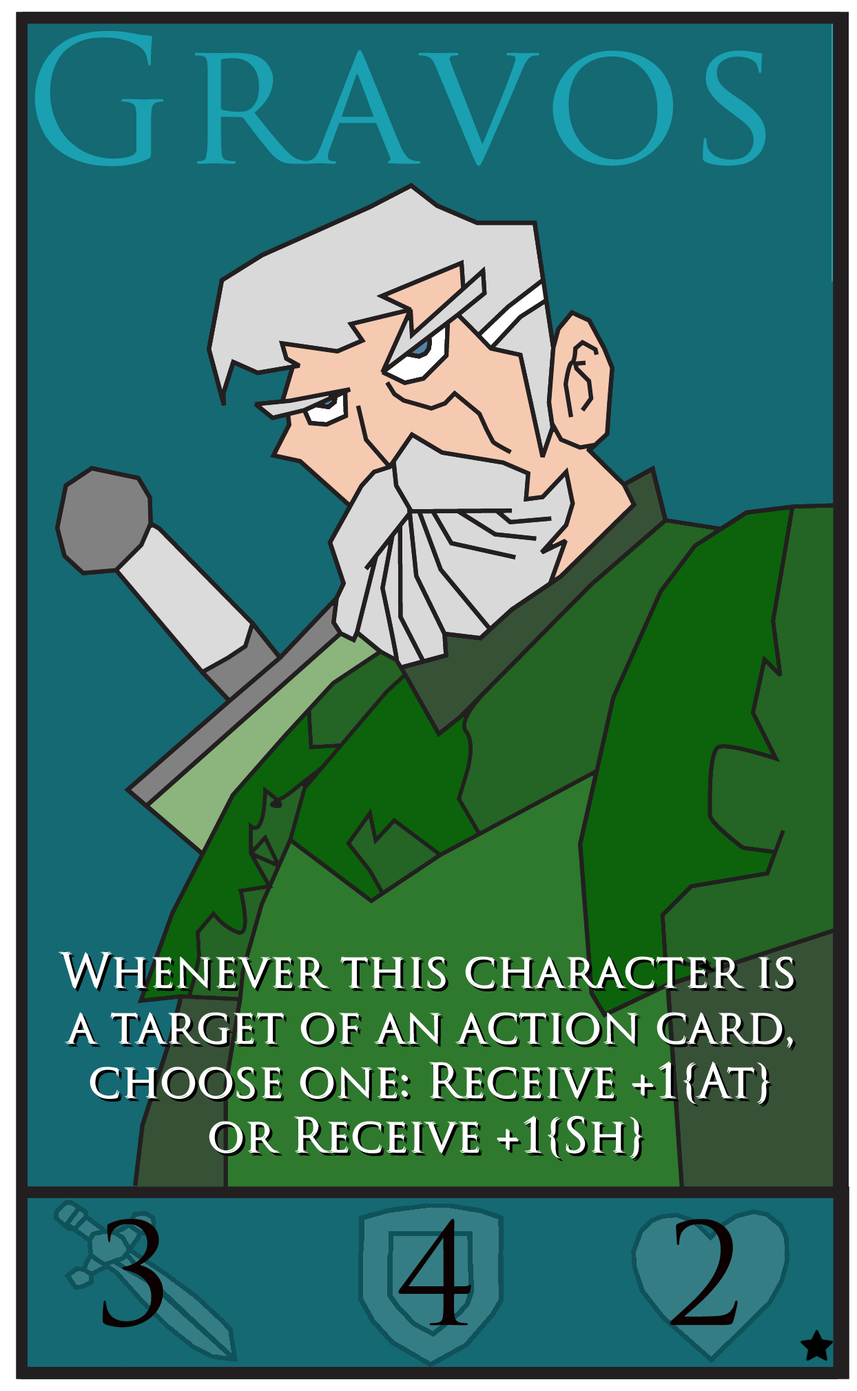
<style>
.page{position:relative;width:857px;height:1391px;background:#146973}
.page>*{position:absolute;margin:0}
.t1{font:45.9px "TrajanPro-Regular";color:#ffffff}
.t2{font:51.7px "TrajanPro-Regular";color:#0c535b}
</style>
<div class="page">
<p class="t1" style="left:59px;top:952px;width:733px;height:36px">Whenever this character is</p>
<p class="t1" style="left:60px;top:953px;width:734px;height:36px">Whenever this character is</p>
<p class="t1" style="left:65px;top:1012px;width:727px;height:35px">a target of an action card,</p>
<p class="t1" style="left:66px;top:1014px;width:727px;height:35px">a target of an action card,</p>
<p class="t1" style="left:90px;top:1061px;width:679px;height:42px">choose one: Receive +1{At}</p>
<p class="t1" style="left:91px;top:1062px;width:679px;height:43px">choose one: Receive +1{At}</p>
<p class="t1" style="left:209px;top:1116px;width:432px;height:42px"><span class="t2"> </span>or Receive +1{Sh}</p>
<p class="t1" style="left:210px;top:1117px;width:433px;height:42px"><span class="t2"> </span>or Receive +1{Sh}</p>
</div>
